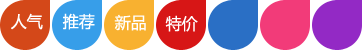
<style>
.page{position:relative;width:362px;height:50px}
.page>*{position:absolute;margin:0}
.t1{font:16px "MicrosoftYaHei";color:#ffffff}
</style>
<div class="page">
<p class="t1" style="left:11px;top:13px;width:32px;height:17px">人气</p>
<p class="t1" style="left:62px;top:13px;width:33px;height:17px">推荐</p>
<p class="t1" style="left:114px;top:14px;width:32px;height:17px">新品</p>
<p class="t1" style="left:165px;top:15px;width:33px;height:17px">特价</p>
</div>
